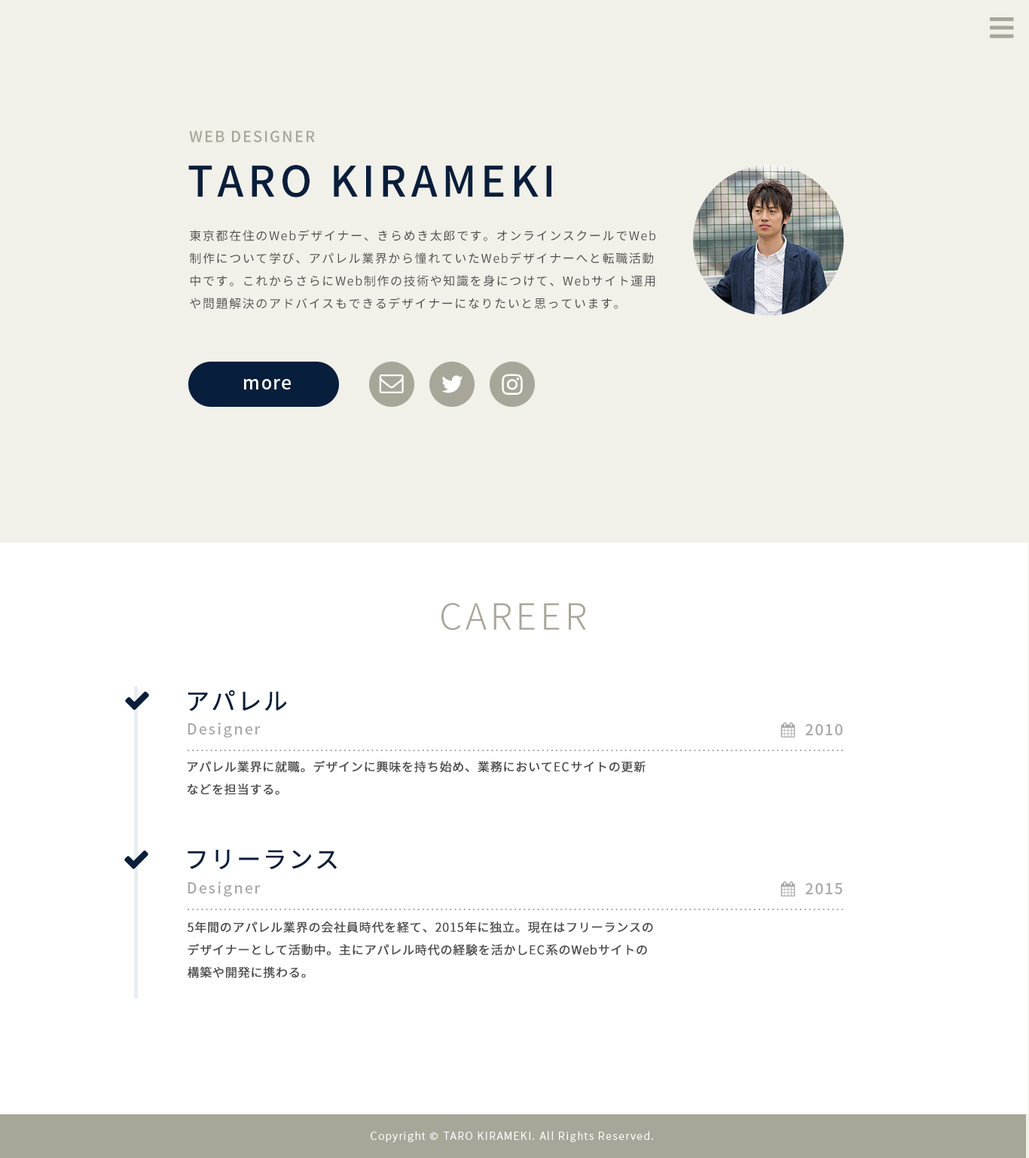
<style>
.page{position:relative;width:1029px;height:1158px;background:#ffffff}
.page>*{position:absolute;margin:0}
.t1{font:15.1px "NotoSansJP-Medium";letter-spacing:0.1em;color:#a8a698}
.t2{font:42.2px "NotoSansJP-Medium";letter-spacing:0.1em;color:#071e3d}
.t3{font:12.1px/22.6px "NotoSansJP-Regular";letter-spacing:0.1em;color:#4c4c4c}
.t4{font:18.1px "NotoSansJP-Medium";letter-spacing:0.05em;color:#ffffff}
.t5{font:36.2px "NotoSansJP-Light";letter-spacing:0.1em;color:#a8a698}
.t6{font:24.1px "NotoSansJP-Regular";letter-spacing:0.05em;color:#071e3d;font-weight:bold}
.t7{font:15.1px "NotoSansJP-Medium";letter-spacing:0.1em;color:#aaaaaa}
.t8{font:12.1px/22.6px "NotoSansJP-Regular";letter-spacing:0.05em;color:#4c4c4c;font-weight:bold}
.t9{font:10.6px "NotoSansJP-Light";letter-spacing:0.1em;color:#ffffff}
</style>
<div class="page">
<p class="t1" style="left:189px;top:130px;width:126px;height:12px">WEB DESIGNER</p>
<p class="t2" style="left:188px;top:165px;width:364px;height:32px">TARO KIRAMEKI</p>
<p class="t3" style="left:190px;top:230px;width:466px;height:79px">東京都在住のWebデザイナー、きらめき太郎です。オンラインスクールでWeb制作について学び、アパレル業界から憧れていたWebデザイナーへと転職活動中です。これからさらにWeb制作の技術や知識を身につけて、Webサイト運用や問題解決のアドバイスもできるデザイナーになりたいと思っています。</p>
<p class="t4" style="left:244px;top:379px;width:47px;height:11px">more</p>
<p class="t5" style="left:442px;top:603px;width:144px;height:28px">CAREER</p>
<p class="t6" style="left:188px;top:690px;width:99px;height:21px">アパレル</p>
<p class="t7" style="left:188px;top:723px;width:73px;height:15px">Designer</p>
<p class="t7" style="left:806px;top:724px;width:37px;height:12px">2010</p>
<p class="t8" style="left:187px;top:760px;width:459px;height:35px">アパレル業界に就職。デザインに興味を持ち始め、業務においてECサイトの更新などを担当する。</p>
<p class="t6" style="left:188px;top:849px;width:149px;height:21px">フリーランス</p>
<p class="t7" style="left:188px;top:882px;width:73px;height:15px">Designer</p>
<p class="t7" style="left:806px;top:883px;width:37px;height:12px">2015</p>
<p class="t8" style="left:188px;top:922px;width:465px;height:56px">5年間のアパレル業界の会社員時代を経て、2015年に独立。現在はフリーランスのデザイナーとして活動中。主にアパレル時代の経験を活かしEC系のWebサイトの構築や開発に携わる。</p>
<p class="t9" style="left:371px;top:1131px;width:282px;height:11px">Copyright © TARO KIRAMEKI. All Rights Reserved.</p>
</div>
